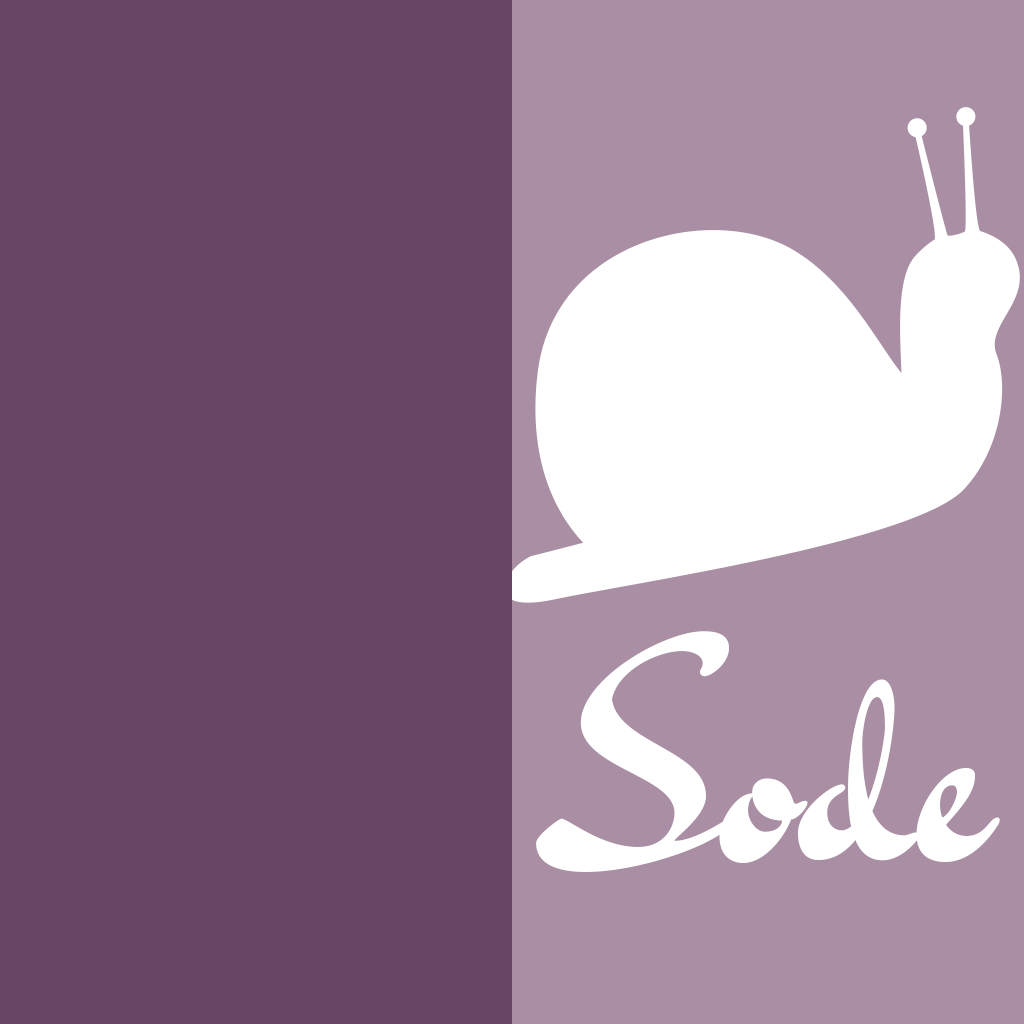
<style>
.page{position:relative;width:1024px;height:1024px;background:#664462}
.page>*{position:absolute;margin:0}
.t1{font:283px "DrSugiyamaPro";color:#ffffff}
</style>
<div class="page">
<p class="t1" style="left:536px;top:631px;width:464px;height:241px">Sode</p>
</div>
